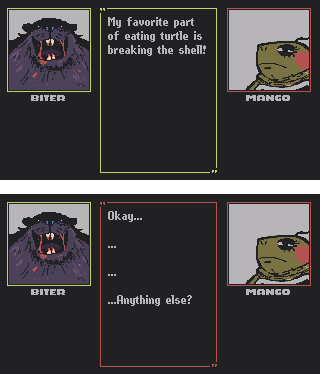
<style>
.page{position:relative;width:320px;height:374px;background:#212123}
.page>*{position:absolute;margin:0}
.t1{font:16px/14px "PixelPurl";color:#b8b5b9}
.t2{font:8px "NotJamChunky8";color:#b8b5b9}
</style>
<div class="page">
<p class="t1" style="left:108px;top:17px;width:98px;height:39px">My favorite part of eating turtle is breaking the shell!</p>
<p class="t2" style="left:31px;top:95px;width:34px;height:6px">BITER</p>
<p class="t2" style="left:246px;top:95px;width:44px;height:6px">MANGO</p>
<p class="t1" style="left:108px;top:211px;width:84px;height:95px">Okay...<br><br>...<br><br>...<br><br>...Anything else?</p>
<p class="t2" style="left:31px;top:289px;width:34px;height:6px">BITER</p>
<p class="t2" style="left:246px;top:289px;width:44px;height:6px">MANGO</p>
</div>
